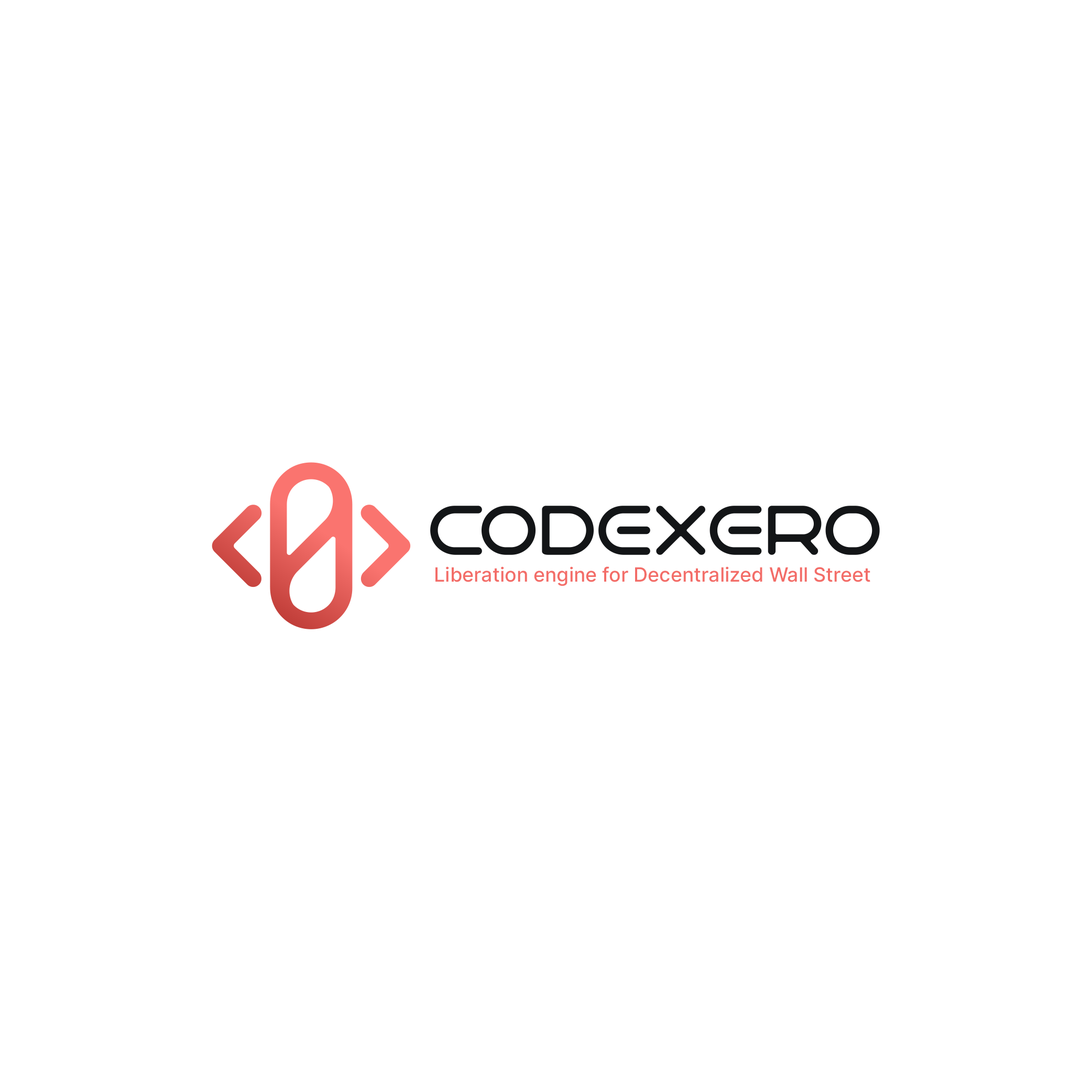
<style>
.page{position:relative;width:1092px;height:1092px;background:#ffffff}
.page>*{position:absolute;margin:0}
.t1{font:19.6px "Inter-Medium";color:#f46e69}
</style>
<div class="page">
<p class="t1" style="left:435px;top:566px;width:435px;height:20px">Liberation engine for Decentralized Wall Street</p>
</div>
